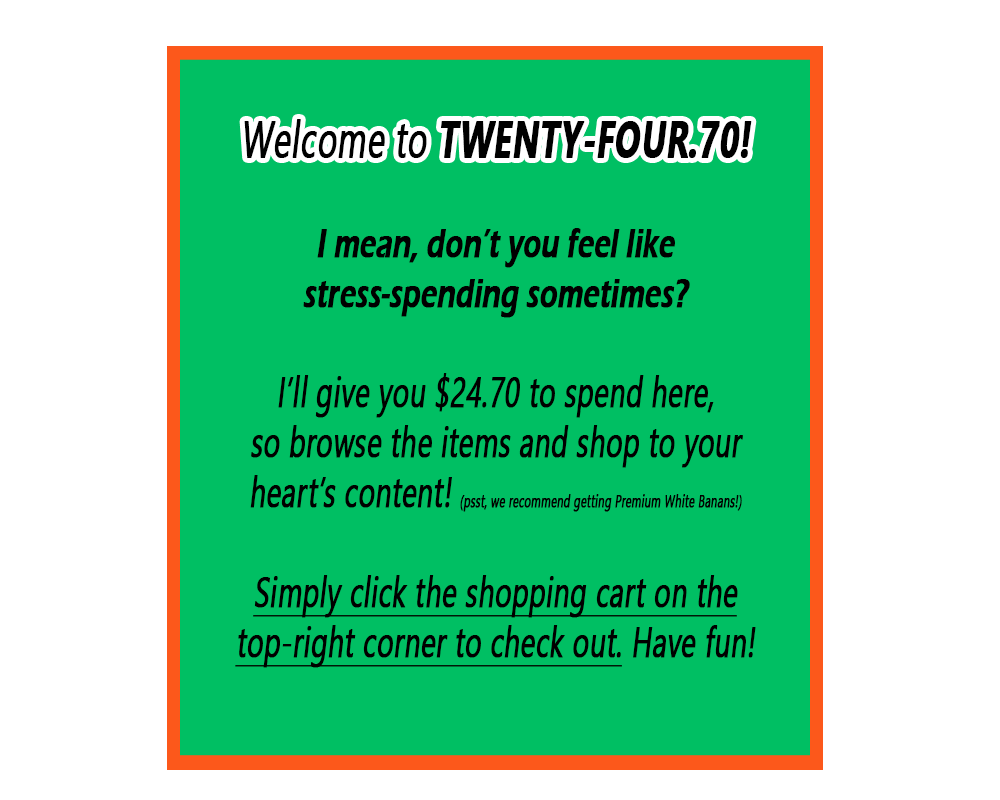
<style>
.page{position:relative;width:1000px;height:800px;background:#00bf63}
.page>*{position:absolute;margin:0}
.t1{font:41.7px/50px "NirmalaUI";color:#000000;font-weight:bold;font-style:italic;scale:0.67 1}
.t2{font:50px/50px "NirmalaUI";color:#000000;font-weight:bold;font-style:italic;scale:0.67 1}
.t3{font:50px/50px "NirmalaUI-Bold";color:#000000;font-weight:bold;font-style:italic;scale:0.67 1}
.t4{font:41.7px/50px "ErasITC-Demi";color:#000000;font-weight:bold;font-style:italic;scale:0.67 1}
.t5{font:16.7px/50px "NirmalaUI";color:#000000;font-weight:bold;font-style:italic;scale:0.67 1}
.t6{font:41.7px/50px "NirmalaUI";color:#000000;font-weight:bold;font-style:italic;text-decoration:underline;scale:0.67 1}
.t7{font:50px "NirmalaUI-Bold";color:#000000;font-weight:bold;font-style:italic;scale:0.67 1}
.t8{font:50px "NirmalaUI";color:#000000;font-weight:bold;font-style:italic;scale:0.67 1}
</style>
<div class="page">
<p class="t1" style="left:235px;top:119px;width:521px;height:549px;text-align:center"><span class="t2">Welcome to </span><span class="t3">TWENTY-FOUR.70!<br><br></span><span class="t4">I mean, don’t you feel like <br>stress-spending sometimes? <br></span><br>I’ll give you $24.70 to spend here, <br>so browse the items and shop to your heart’s content! <span class="t5">(psst, we recommend getting Premium White Banans!)<br><br></span><span class="t6">Simply click the shopping cart on the top-right corner to check out.</span> Have fun!</p>
<p class="t7" style="left:244px;top:119px;width:508px;height:39px"><span class="t8">Welcome to </span>TWENTY-FOUR.70!</p>
</div>
